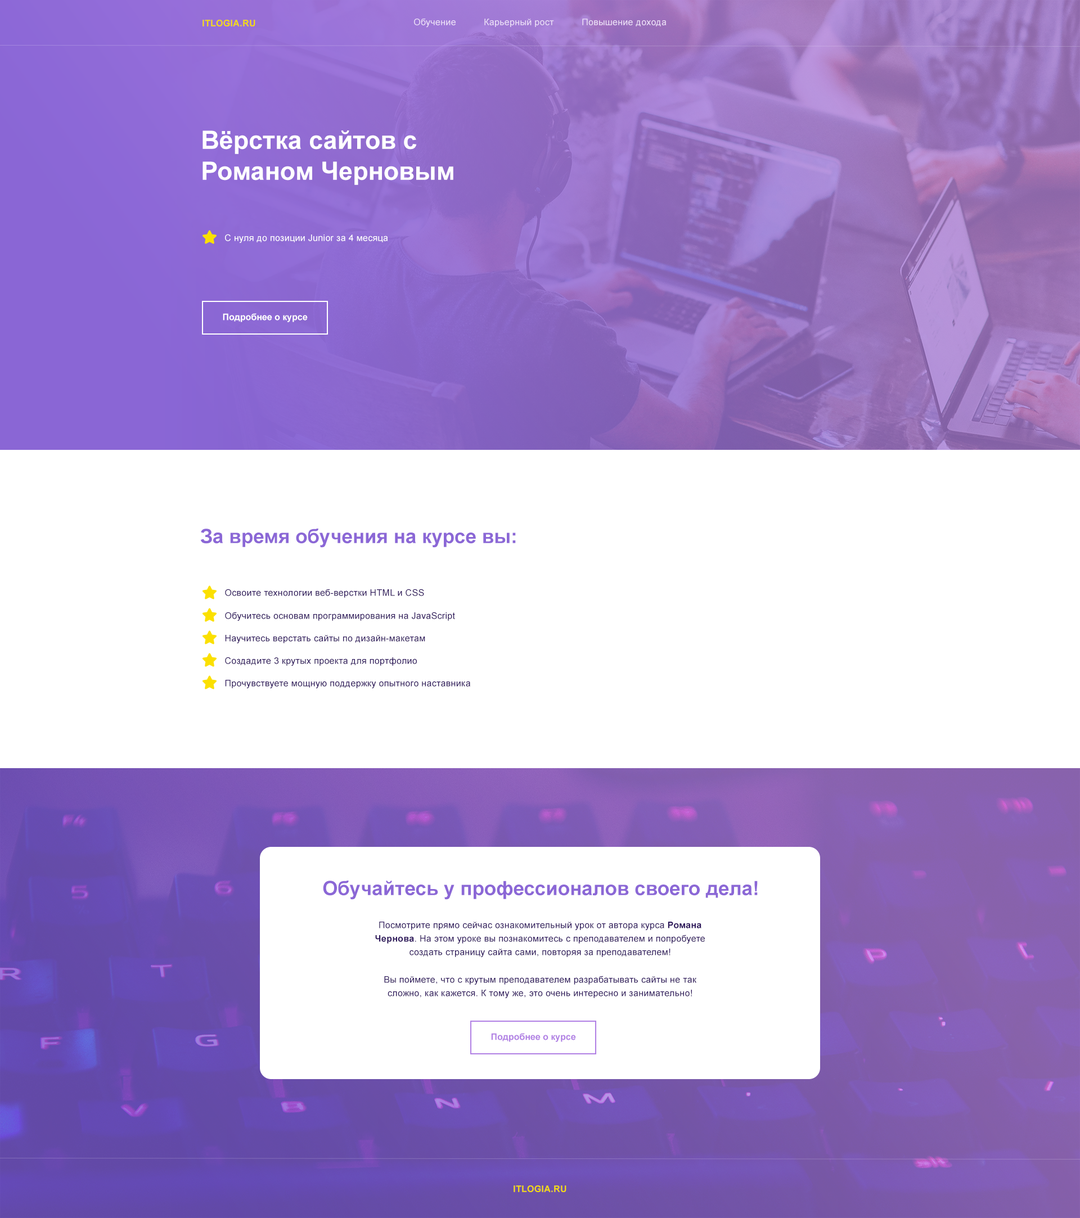
<style>
.page{position:relative;width:1080px;height:1218px;background:#ffffff}
.page>*{position:absolute;margin:0}
.t1{font:9px "Arial-BoldMT";letter-spacing:0.02em;color:#f5da0b;text-transform:uppercase}
.t2{font:9px "ArialMT";letter-spacing:0.02em;color:#ede0f8}
.t3{font:25.3px/30.9px "Arial-BoldMT";color:#ffffff}
.t4{font:9px "ArialMT";letter-spacing:0.02em;color:#ffffff}
.t5{font:9px "Arial-BoldMT";color:#ffffff}
.t6{font:19.7px "Arial-BoldMT";color:#8b67d6}
.t7{font:9px "ArialMT";letter-spacing:0.02em;color:#311b5e}
.t8{font:9px/13.5px "ArialMT";letter-spacing:0.02em;color:#311b5e}
.t9{font:9px/13.5px "Arial-BoldMT";letter-spacing:0.02em;color:#311b5e}
.t10{font:9px "Arial-BoldMT";color:#b180e4}
</style>
<div class="page">
<p class="t1" style="left:202px;top:20px;width:53px;height:6px">itlogia.ru</p>
<p class="t2" style="left:414px;top:19px;width:42px;height:9px">Обучение</p>
<p class="t2" style="left:484px;top:19px;width:70px;height:8px">Карьерный рост</p>
<p class="t2" style="left:582px;top:19px;width:85px;height:7px">Повышение дохода</p>
<p class="t3" style="left:202px;top:130px;width:251px;height:55px">Вёрстка сайтов с <br>Романом Черновым</p>
<p class="t4" style="left:225px;top:234px;width:163px;height:9px">С нуля до позиции Junior за 4 месяца</p>
<p class="t5" style="left:223px;top:313px;width:85px;height:9px">Подробнее о курсе</p>
<p class="t6" style="left:200px;top:529px;width:316px;height:19px">За время обучения на курсе вы:</p>
<p class="t7" style="left:225px;top:589px;width:199px;height:9px">Освоите технологии веб-верстки HTML и CSS</p>
<p class="t7" style="left:225px;top:612px;width:230px;height:9px">Обучитесь основам программирования на JavaScript</p>
<p class="t7" style="left:225px;top:635px;width:200px;height:9px">Научитесь верстать сайты по дизайн-макетам</p>
<p class="t7" style="left:225px;top:657px;width:192px;height:9px">Создадите 3 крутых проекта для портфолио</p>
<p class="t7" style="left:225px;top:680px;width:245px;height:8px">Прочувствуете мощную поддержку опытного наставника</p>
<p class="t6" style="left:323px;top:881px;width:435px;height:19px">Обучайтесь у профессионалов своего дела!</p>
<p class="t8" style="left:375px;top:922px;width:330px;height:35px;text-align:center">Посмотрите прямо сейчас ознакомительный урок от автора курса <span class="t9">Романа Чернова</span>. На этом уроке вы познакомитесь с преподавателем и попробуете создать страницу сайта сами, повторяя за преподавателем!</p>
<p class="t8" style="left:384px;top:976px;width:312px;height:22px;text-align:center">Вы поймете, что с крутым преподавателем разрабатывать сайты не так сложно, как кажется. К тому же, это очень интересно и занимательно!</p>
<p class="t10" style="left:491px;top:1033px;width:85px;height:9px">Подробнее о курсе</p>
<p class="t1" style="left:514px;top:1186px;width:52px;height:6px">itlogia.ru</p>
</div>
